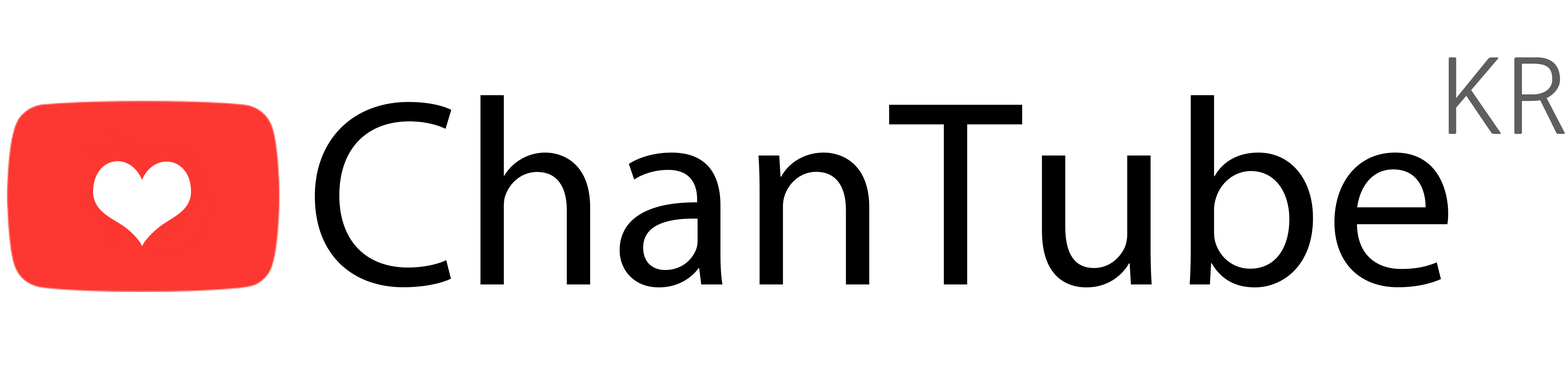
<style>
.page{position:relative;width:1568px;height:392px;background:#ffffff}
.page>*{position:absolute;margin:0}
.t1{font:103.5px "NanumGothic";color:#5e5e5e}
.t2{font:266.6px "MyriadConceptRoman-Regular";letter-spacing:0.005em;color:#000000}
</style>
<div class="page">
<p class="t1" style="left:1449px;top:57px;width:116px;height:77px">KR</p>
<p class="t2" style="left:315px;top:95px;width:1133px;height:193px">ChanTube</p>
</div>
